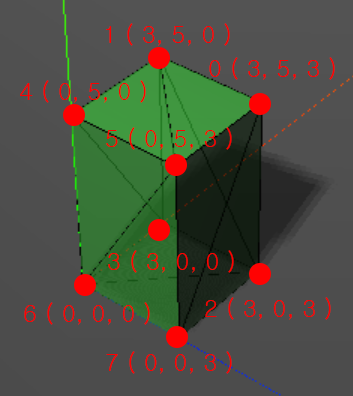
<style>
.page{position:relative;width:353px;height:396px}
.page>*{position:absolute;margin:0}
.t1{font:12px "Gulim";color:#fe0000}
</style>
<div class="page">
<p class="t1" style="left:106px;top:23px;width:124px;height:23px">1 ( 3, 5, 0 )</p>
<p class="t1" style="left:209px;top:57px;width:126px;height:23px">0 ( 3, 5, 3 )</p>
<p class="t1" style="left:20px;top:80px;width:126px;height:23px">4 ( 0, 5, 0 )</p>
<p class="t1" style="left:106px;top:127px;width:126px;height:23px">5 ( 0, 5, 3 )</p>
<p class="t1" style="left:108px;top:250px;width:126px;height:23px">3 ( 3, 0, 0 )</p>
<p class="t1" style="left:24px;top:302px;width:126px;height:23px">6 ( 0, 0, 0 )</p>
<p class="t1" style="left:205px;top:297px;width:126px;height:23px">2 ( 3, 0, 3 )</p>
<p class="t1" style="left:106px;top:351px;width:126px;height:23px">7 ( 0, 0, 3 )</p>
</div>
